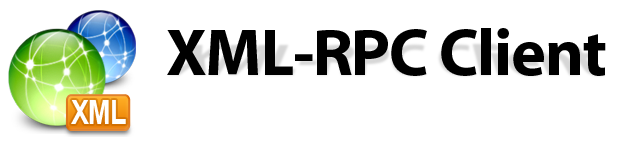
<style>
.page{position:relative;width:622px;height:148px;background:#ffffff}
.page>*{position:absolute;margin:0}
.t1{font:66.6px "Myriad-Bold";letter-spacing:-0.02em;color:#000000}
.t2{font:33.3px "Arial-BoldMT";letter-spacing:-0.04em;color:#ffffff;scale:0.82 1}
</style>
<div class="page">
<p class="t1" style="left:167px;top:28px;width:439px;height:48px">XML-RPC Client</p>
<p class="t2" style="left:71px;top:100px;width:55px;height:24px">XML</p>
</div>
